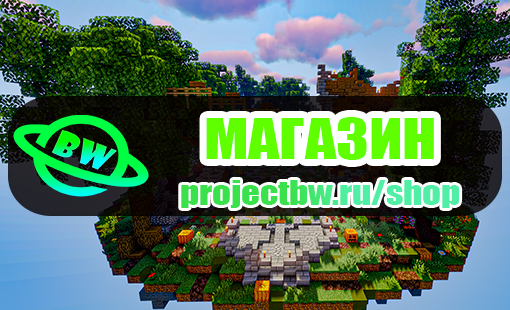
<style>
.page{position:relative;width:510px;height:310px}
.page>*{position:absolute;margin:0}
.t1{font:52.3px "Impact";color:#60ff00;scale:1.18 1}
.t2{font:31.1px "Impact";scale:1.18 1}
</style>
<div class="page">
<p class="t1" style="left:206px;top:117px;width:228px;height:43px">МАГАЗИН</p>
<p class="t2" style="left:181px;top:180px;width:279px;height:28px">projectbw.ru/shop</p>
</div>
